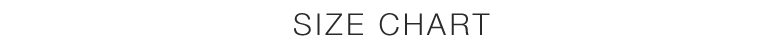
<style>
.page{position:relative;width:784px;height:47px;background:#ffffff}
.page>*{position:absolute;margin:0}
.t1{font:30px "HelveticaNeue-Light";letter-spacing:0.11em;color:#2a2a2a}
</style>
<div class="page">
<p class="t1" style="left:294px;top:13px;width:196px;height:23px">SIZE CHART</p>
</div>
